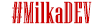
<style>
.page{position:relative;width:100px;height:25px;background:#ffffff}
.page>*{position:absolute;margin:0}
.t1{font:30px "NiagaraEngraved-Reg";color:#cc0000;font-weight:bold}
</style>
<div class="page">
<p class="t1" style="left:11px;top:1px;width:81px;height:23px">#MilkaDEV</p>
</div>
